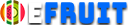
<style>
.page{position:relative;width:128px;height:25px;background:#006afb}
.page>*{position:absolute;margin:0}
.t1{font:28.7px "Bungee-Regular";letter-spacing:0.04em;color:#006afb;scale:0.82 1}
.t2{font:28.7px "Bungee-Regular";letter-spacing:0.04em;color:#ffffff;scale:0.82 1}
</style>
<div class="page">
<p class="t1" style="left:29px;top:2px;width:98px;height:22px"><span class="t2">e</span>Fruit</p>
</div>
